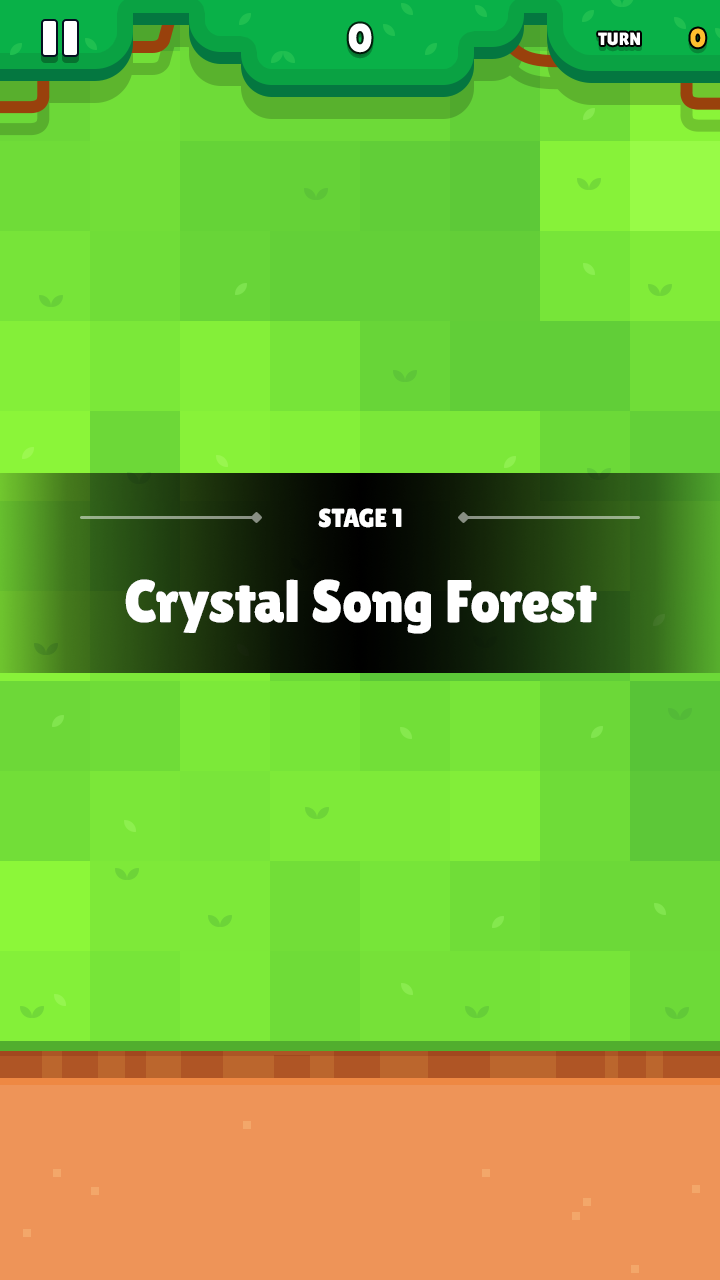
<style>
.page{position:relative;width:720px;height:1280px}
.page>*{position:absolute;margin:0}
.t1{font:40px "LilitaOne";color:#ffffff}
.t2{font:26px "LilitaOne";color:#ffbe2e;text-transform:uppercase}
.t3{font:18px "LilitaOne";color:#ffffff;text-transform:uppercase}
.t4{font:26px "LilitaOne";color:#ffffff;text-transform:uppercase}
.t5{font:60px "LilitaOne";color:#ffffff}
</style>
<div class="page">
<p class="t1" style="left:348px;top:23px;width:24px;height:30px">0</p>
<p class="t2" style="left:690px;top:28px;width:16px;height:20px">0</p>
<p class="t3" style="left:598px;top:32px;width:42px;height:14px">turn</p>
<p class="t4" style="left:318px;top:508px;width:84px;height:20px">stage 1</p>
<p class="t5" style="left:125px;top:579px;width:472px;height:55px">Crystal Song Forest</p>
</div>
